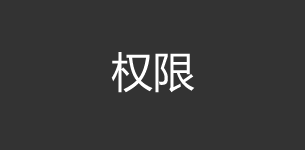
<style>
.page{position:relative;width:305px;height:150px;background:#333333}
.page>*{position:absolute;margin:0}
.t1{font:41.7px "MicrosoftYaHei";color:#ffffff}
</style>
<div class="page">
<p class="t1" style="left:111px;top:52px;width:84px;height:41px">权限</p>
</div>
